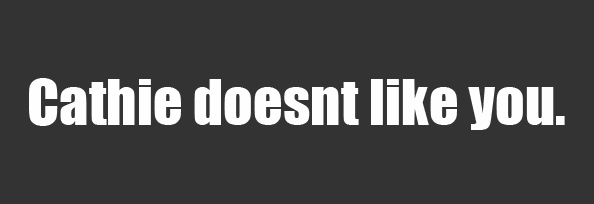
<style>
.page{position:relative;width:594px;height:204px;background:#333333}
.page>*{position:absolute;margin:0}
.t1{font:58.3px "Impact";color:#fffefe}
</style>
<div class="page">
<p class="t1" style="left:29px;top:78px;width:536px;height:52px">Cathie doesnt like you.</p>
</div>
